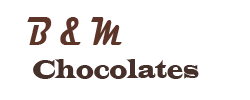
<style>
.page{position:relative;width:250px;height:100px;background:#ffffff}
.page>*{position:absolute;margin:0}
.t1{font:27.5px "LatinWide";color:#46302a;scale:0.66 1}
.t2{font:41.2px "Magneto-Bold";color:#5d3428;scale:0.66 1}
</style>
<div class="page">
<p class="t1" style="left:27px;top:17px;width:172px;height:62px"><span class="t2">B &amp; M      <br></span> Chocolates</p>
</div>
